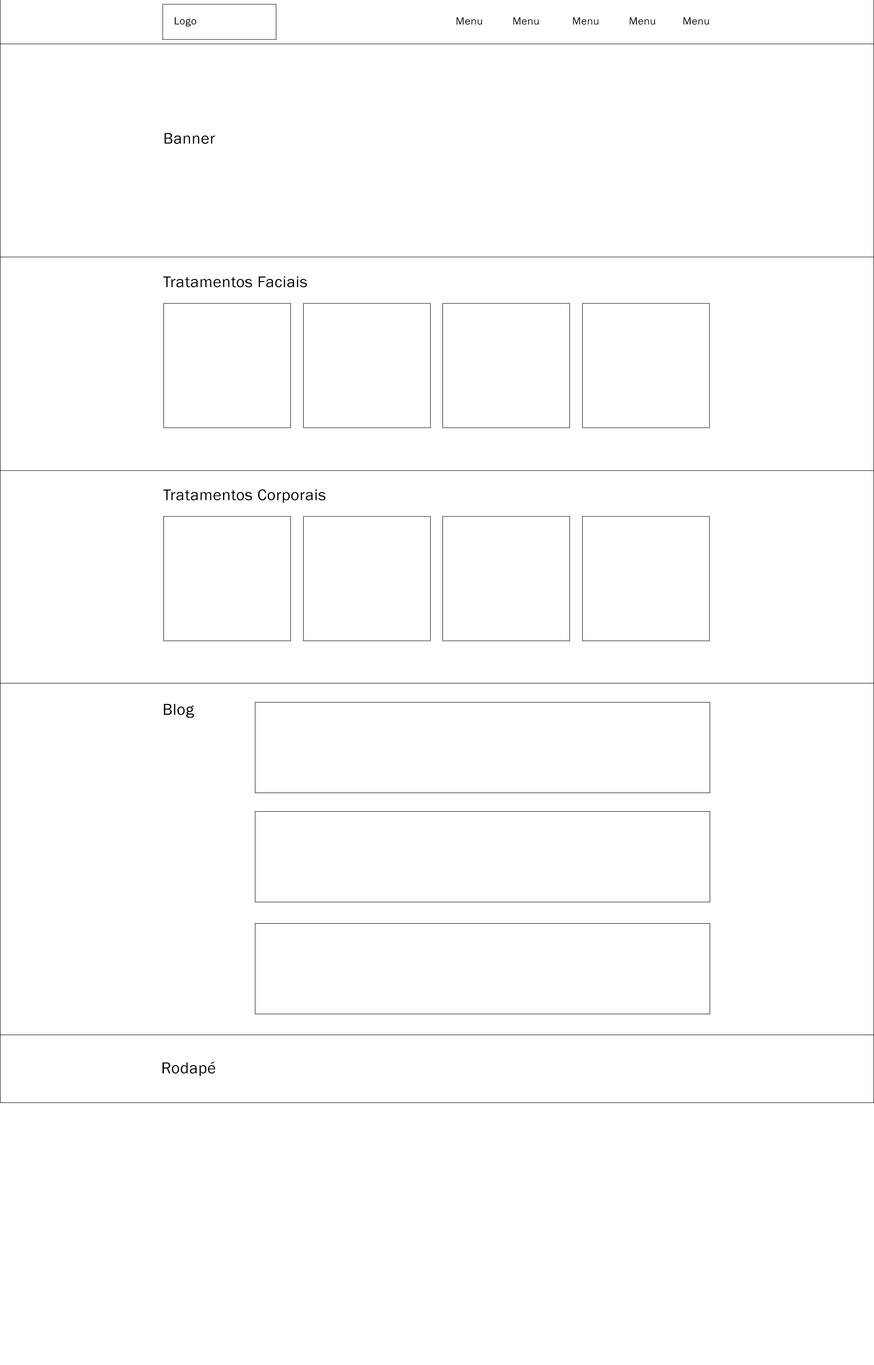
<style>
.page{position:relative;width:874px;height:1365px;background:#ffffff}
.page>*{position:absolute;margin:0}
.t1{font:10.7px "FranklinGothic-Book";letter-spacing:0.02em;color:#000000}
.t2{font:16px "FranklinGothic-Book";letter-spacing:0.02em;color:#000000}
.t3{font:16.4px "FranklinGothic-Book";letter-spacing:0.02em;color:#000000}
</style>
<div class="page">
<p class="t1" style="left:175px;top:17px;width:21px;height:10px">Logo</p>
<p class="t1" style="left:456px;top:17px;width:253px;height:8px">Menu          Menu           Menu          Menu         Menu</p>
<p class="t2" style="left:164px;top:133px;width:51px;height:11px">Banner</p>
<p class="t2" style="left:163px;top:276px;width:144px;height:12px">Tratamentos Faciais</p>
<p class="t2" style="left:163px;top:489px;width:162px;height:14px">Tratamentos Corporais</p>
<p class="t3" style="left:164px;top:704px;width:30px;height:14px">Blog</p>
<p class="t3" style="left:162px;top:1062px;width:53px;height:14px">Rodapé</p>
</div>
